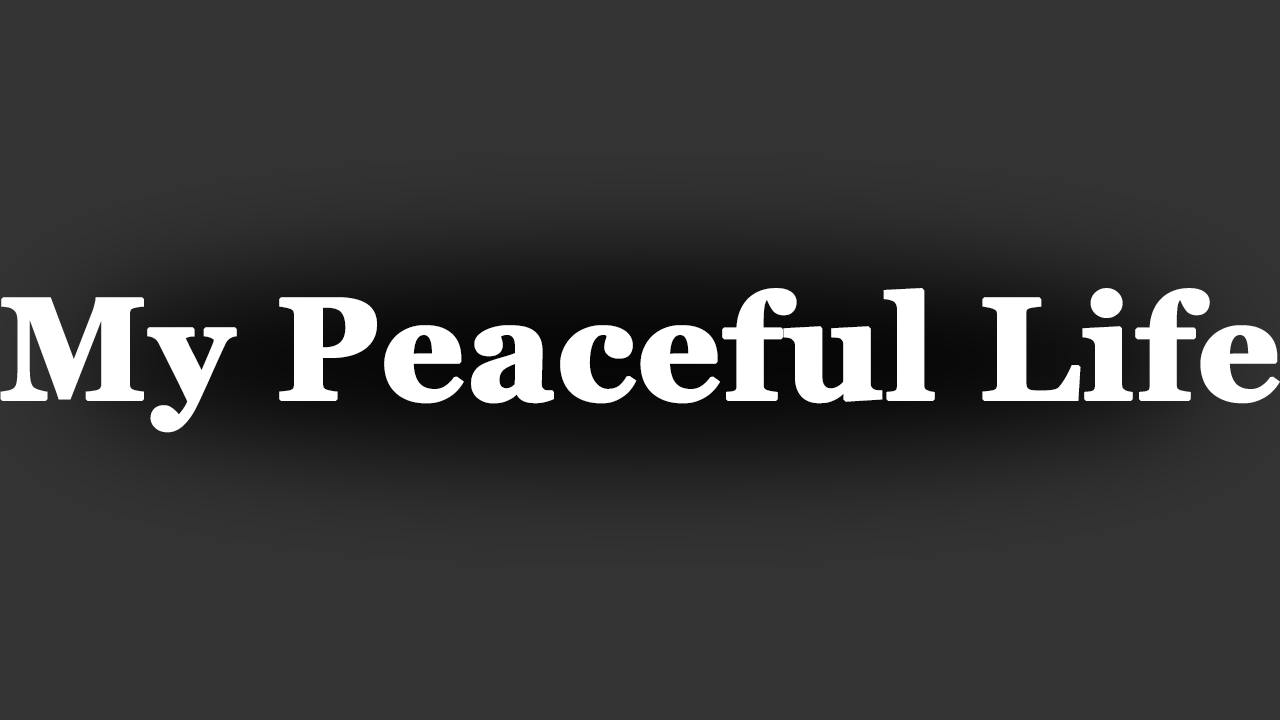
<style>
.page{position:relative;width:1280px;height:720px;background:#333333}
.page>*{position:absolute;margin:0}
.t1{font:144px "Georgia-Bold";color:#ffffff;font-weight:bold}
</style>
<div class="page">
<p class="t1" style="left:0px;top:288px;width:1280px;height:145px">My Peaceful Life</p>
</div>
